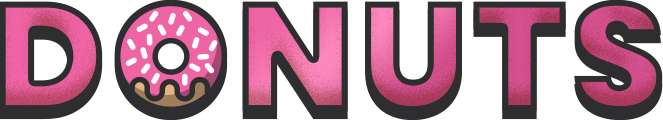
<style>
.page{position:relative;width:663px;height:120px;background:#2e2e30}
.page>*{position:absolute;margin:0}
.t1{font:154.5px "Poppins-Black";letter-spacing:0.02em}
</style>
<div class="page">
<p class="t1" style="left:0px;top:0px;width:663px;height:113px">DONUTS</p>
<p class="t1" style="left:0px;top:7px;width:663px;height:114px">DONUTS</p>
</div>
